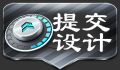
<style>
.page{position:relative;width:120px;height:70px}
.page>*{position:absolute;margin:0}
.t1{font:30px "LiSu";color:#ffffff}
</style>
<div class="page">
<p class="t1" style="left:52px;top:12px;width:58px;height:20px">提交</p>
<p class="t1" style="left:52px;top:33px;width:60px;height:19px">设计</p>
</div>
